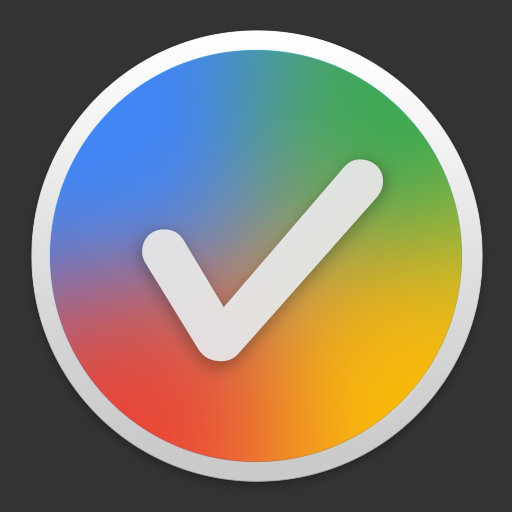
<style>
.page{position:relative;width:512px;height:512px;background:#333333}
.page>*{position:absolute;margin:0}
.t1{font:250px "SFProDisplay-Bold";color:#ebebeb;font-weight:bold}
</style>
<div class="page">
<p class="t1" style="left:142px;top:159px;width:241px;height:203px;rotate:8deg;opacity:0.9">􀆅</p>
</div>
